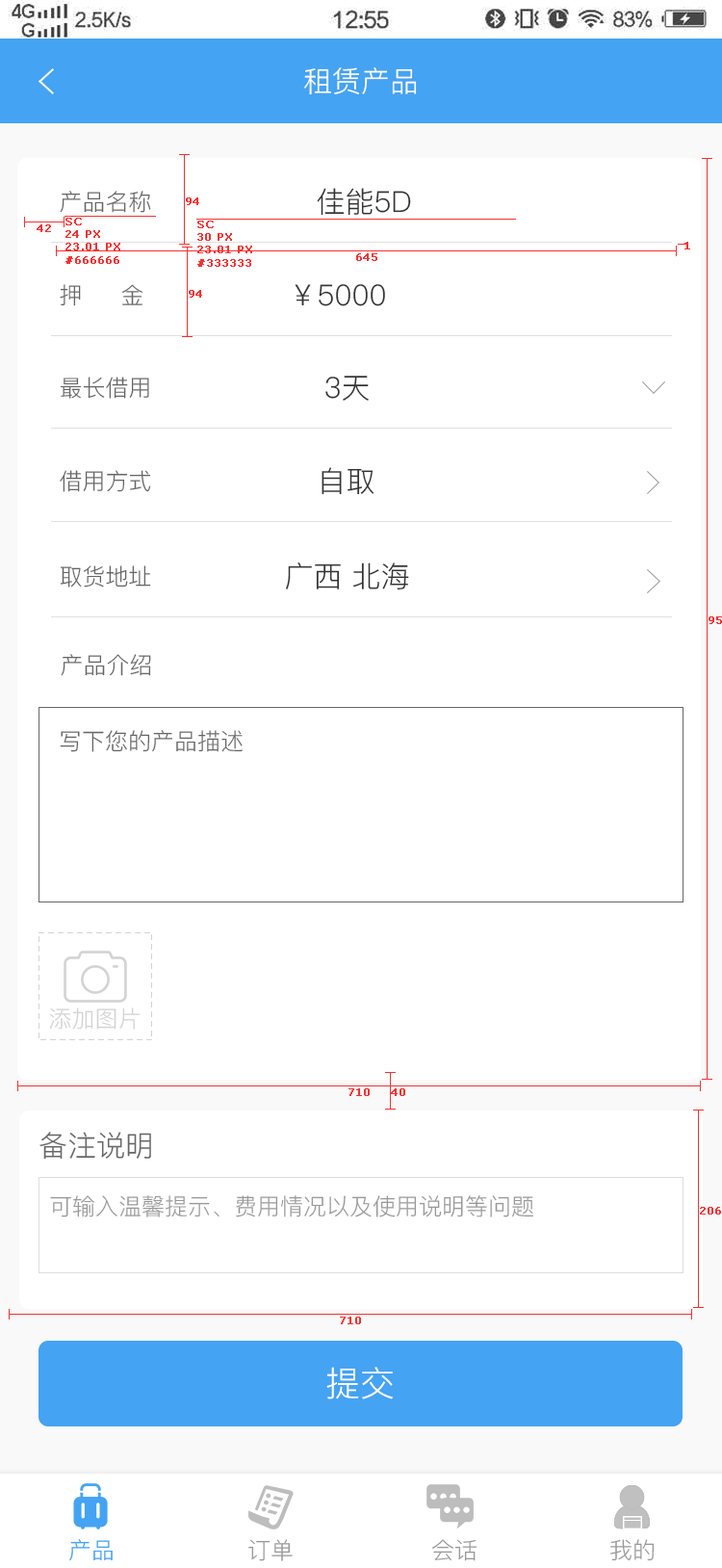
<style>
.page{position:relative;width:722px;height:1568px;background:#ffffff}
.page>*{position:absolute;margin:0}
.t1{font:28.9px "PingFang-SC-Regular";color:#ffffff;text-transform:uppercase}
.t2{font:23.1px "PingFang-SC-Regular";color:#666666;text-transform:uppercase}
.t3{font:10.6px "Verdana";color:#f83030;font-weight:bold}
.t4{font:28.9px "PingFang-SC-Regular";color:#333333;text-transform:uppercase}
.t5{font:23.1px "PingFang-SC-Regular";color:#d3d3d3;text-transform:uppercase}
.t6{font:28.9px "PingFang-SC-Regular";color:#666666;text-transform:uppercase}
.t7{font:23.1px "PingFang-SC-Regular";color:#999999;text-transform:uppercase}
.t8{font:34.7px "PingFang-SC-Regular";color:#ffffff;text-transform:uppercase}
.t9{font:23.1px "PingFang-SC-Regular";color:#44a3f2;text-transform:uppercase}
</style>
<div class="page">
<p class="t1" style="left:304px;top:67px;width:113px;height:28px">租赁产品</p>
<p class="t2" style="left:60px;top:191px;width:91px;height:22px">产品名称</p>
<p class="t3" style="left:186px;top:197px;width:13px;height:8px">94</p>
<p class="t4" style="left:317px;top:188px;width:94px;height:28px">佳能5D</p>
<p class="t3" style="left:65px;top:218px;width:55px;height:46px">SC<br>24 PX<br>23.01 PX<br>#666666</p>
<p class="t3" style="left:197px;top:221px;width:55px;height:46px">SC<br>30 PX<br>23.01 PX<br>#333333</p>
<p class="t3" style="left:37px;top:224px;width:14px;height:8px">42</p>
<p class="t3" style="left:685px;top:242px;width:6px;height:7px">1</p>
<p class="t3" style="left:356px;top:253px;width:22px;height:8px">645</p>
<p class="t2" style="left:60px;top:284px;width:84px;height:22px">押     金</p>
<p class="t3" style="left:189px;top:290px;width:13px;height:8px">94</p>
<p class="t4" style="left:295px;top:284px;width:90px;height:22px">￥5000</p>
<p class="t2" style="left:60px;top:377px;width:89px;height:22px">最长借用</p>
<p class="t4" style="left:326px;top:376px;width:43px;height:25px">3天</p>
<p class="t2" style="left:60px;top:470px;width:91px;height:22px">借用方式</p>
<p class="t4" style="left:322px;top:467px;width:53px;height:28px">自取</p>
<p class="t2" style="left:60px;top:565px;width:91px;height:23px">取货地址</p>
<p class="t4" style="left:286px;top:562px;width:123px;height:28px">广西 北海</p>
<p class="t2" style="left:61px;top:654px;width:90px;height:22px">产品介绍</p>
<p class="t2" style="left:60px;top:730px;width:183px;height:22px">写下您的产品描述</p>
<p class="t5" style="left:49px;top:1007px;width:91px;height:23px">添加图片</p>
<p class="t3" style="left:349px;top:1088px;width:21px;height:8px">710</p>
<p class="t3" style="left:391px;top:1088px;width:14px;height:8px">40</p>
<p class="t6" style="left:39px;top:1132px;width:112px;height:28px">备注说明</p>
<p class="t7" style="left:50px;top:1195px;width:484px;height:22px">可输入温馨提示、费用情况以及使用说明等问题</p>
<p class="t3" style="left:700px;top:1207px;width:21px;height:8px">206</p>
<p class="t3" style="left:340px;top:1317px;width:21px;height:7px">710</p>
<p class="t8" style="left:327px;top:1367px;width:67px;height:32px">提交</p>
<p class="t9" style="left:69px;top:1539px;width:44px;height:22px">产品</p>
<p class="t7" style="left:248px;top:1539px;width:45px;height:22px">订单</p>
<p class="t7" style="left:432px;top:1539px;width:45px;height:22px">会话</p>
<p class="t7" style="left:611px;top:1539px;width:44px;height:22px">我的</p>
</div>
